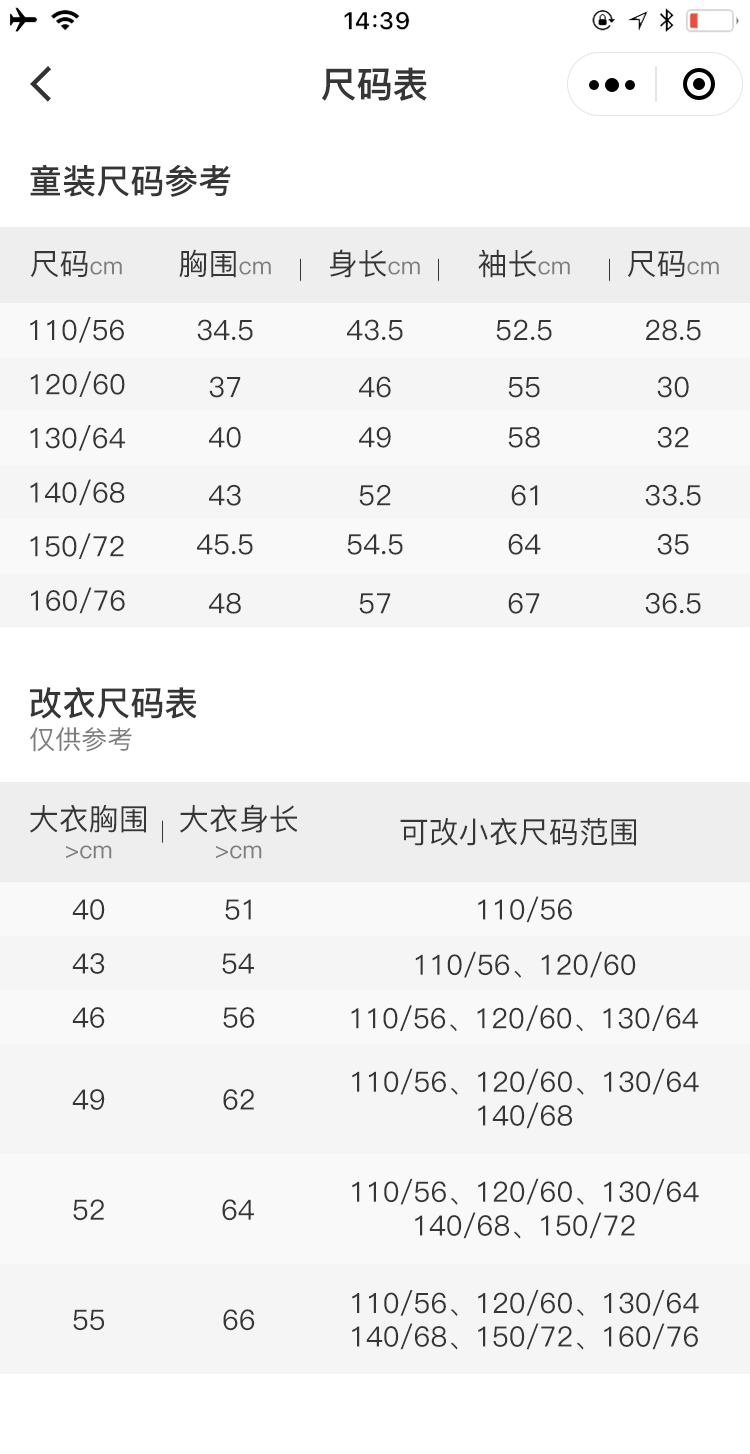
<style>
.page{position:relative;width:750px;height:1454px;background:#ffffff}
.page>*{position:absolute;margin:0}
.t1{font:36px "PingFang-SC-Heavy";color:#363636}
.t2{font:34px "PingFang-SC-Bold";color:#363636}
.t3{font:30px "PingFang-SC-Medium";color:#363636}
.t4{font:24px "PingFang-SC-Medium";color:#7e7e7e}
.t5{font:28px "PingFang-SC-Medium";color:#363636}
.t6{font:26px "PingFang-SC-Medium";color:#7e7e7e}
</style>
<div class="page">
<p class="t1" style="left:322px;top:67px;width:105px;height:34px">尺码表</p>
<p class="t2" style="left:30px;top:164px;width:201px;height:33px">童装尺码参考</p>
<p class="t3" style="left:30px;top:251px;width:92px;height:26px">尺码<span class="t4">cm</span></p>
<p class="t3" style="left:179px;top:249px;width:92px;height:29px">胸围<span class="t4">cm</span></p>
<p class="t3" style="left:330px;top:249px;width:90px;height:29px">身长<span class="t4">cm</span></p>
<p class="t3" style="left:478px;top:249px;width:92px;height:29px">袖长<span class="t4">cm</span></p>
<p class="t3" style="left:627px;top:251px;width:92px;height:26px">尺码<span class="t4">cm</span></p>
<p class="t5" style="left:30px;top:317px;width:94px;height:26px">110/56</p>
<p class="t5" style="left:197px;top:319px;width:56px;height:22px">34.5</p>
<p class="t5" style="left:347px;top:319px;width:56px;height:22px">43.5</p>
<p class="t5" style="left:496px;top:319px;width:56px;height:22px">52.5</p>
<p class="t5" style="left:646px;top:319px;width:55px;height:22px">28.5</p>
<p class="t5" style="left:30px;top:371px;width:95px;height:26px">120/60</p>
<p class="t5" style="left:209px;top:376px;width:32px;height:22px">37</p>
<p class="t5" style="left:359px;top:376px;width:32px;height:22px">46</p>
<p class="t5" style="left:508px;top:377px;width:32px;height:21px">55</p>
<p class="t5" style="left:657px;top:376px;width:32px;height:22px">30</p>
<p class="t5" style="left:30px;top:425px;width:95px;height:26px">130/64</p>
<p class="t5" style="left:209px;top:426px;width:32px;height:22px">40</p>
<p class="t5" style="left:359px;top:426px;width:32px;height:22px">49</p>
<p class="t5" style="left:508px;top:426px;width:32px;height:22px">58</p>
<p class="t5" style="left:657px;top:426px;width:32px;height:22px">32</p>
<p class="t5" style="left:30px;top:479px;width:95px;height:27px">140/68</p>
<p class="t5" style="left:209px;top:484px;width:32px;height:22px">43</p>
<p class="t5" style="left:359px;top:484px;width:32px;height:22px">52</p>
<p class="t5" style="left:511px;top:484px;width:27px;height:22px">61</p>
<p class="t5" style="left:645px;top:484px;width:56px;height:22px">33.5</p>
<p class="t5" style="left:30px;top:533px;width:94px;height:26px">150/72</p>
<p class="t5" style="left:197px;top:534px;width:56px;height:21px">45.5</p>
<p class="t5" style="left:347px;top:534px;width:56px;height:21px">54.5</p>
<p class="t5" style="left:508px;top:533px;width:33px;height:22px">64</p>
<p class="t5" style="left:657px;top:533px;width:32px;height:22px">35</p>
<p class="t5" style="left:31px;top:587px;width:94px;height:27px">160/76</p>
<p class="t5" style="left:209px;top:592px;width:32px;height:22px">48</p>
<p class="t5" style="left:359px;top:593px;width:32px;height:21px">57</p>
<p class="t5" style="left:508px;top:592px;width:32px;height:22px">67</p>
<p class="t5" style="left:645px;top:592px;width:56px;height:22px">36.5</p>
<p class="t2" style="left:30px;top:687px;width:167px;height:32px">改衣尺码表</p>
<p class="t6" style="left:30px;top:727px;width:102px;height:25px">仅供参考</p>
<p class="t3" style="left:30px;top:805px;width:116px;height:54px;text-align:center">大衣胸围<br><span class="t4">&gt;cm</span></p>
<p class="t3" style="left:180px;top:804px;width:118px;height:55px;text-align:center">大衣身长<br><span class="t4">&gt;cm</span></p>
<p class="t3" style="left:400px;top:818px;width:236px;height:28px">可改小衣尺码范围</p>
<p class="t5" style="left:72px;top:899px;width:33px;height:21px">40</p>
<p class="t5" style="left:225px;top:899px;width:26px;height:21px">51</p>
<p class="t5" style="left:478px;top:896px;width:94px;height:27px">110/56</p>
<p class="t5" style="left:72px;top:953px;width:33px;height:21px">43</p>
<p class="t5" style="left:222px;top:953px;width:32px;height:21px">54</p>
<p class="t5" style="left:415px;top:951px;width:221px;height:27px">110/56、120/60</p>
<p class="t5" style="left:72px;top:1007px;width:33px;height:21px">46</p>
<p class="t5" style="left:223px;top:1007px;width:32px;height:21px">56</p>
<p class="t5" style="left:351px;top:1005px;width:347px;height:27px">110/56、120/60、130/64</p>
<p class="t5" style="left:352px;top:1068px;width:347px;height:61px;text-align:center">110/56、120/60、130/64<br>140/68</p>
<p class="t5" style="left:72px;top:1089px;width:33px;height:21px">49</p>
<p class="t5" style="left:223px;top:1089px;width:31px;height:21px">62</p>
<p class="t5" style="left:352px;top:1178px;width:347px;height:61px;text-align:center">110/56、120/60、130/64<br>140/68、150/72</p>
<p class="t5" style="left:73px;top:1199px;width:31px;height:22px">52</p>
<p class="t5" style="left:222px;top:1199px;width:32px;height:22px">64</p>
<p class="t5" style="left:352px;top:1290px;width:347px;height:60px">110/56、120/60、130/64<br>140/68、150/72、160/76</p>
<p class="t5" style="left:73px;top:1309px;width:31px;height:22px">55</p>
<p class="t5" style="left:223px;top:1309px;width:32px;height:22px">66</p>
</div>
